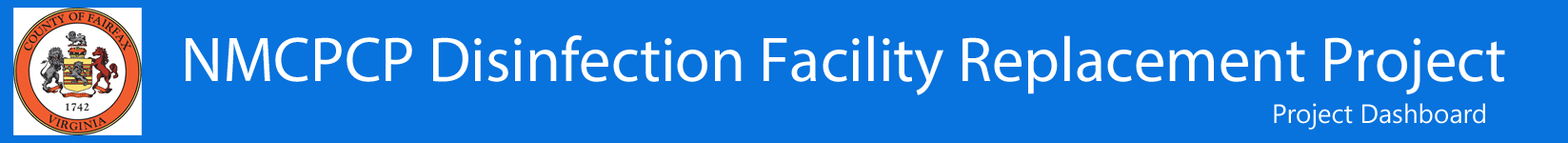
<style>
.page{position:relative;width:1568px;height:143px;background:#0872dd}
.page>*{position:absolute;margin:0}
.t1{font:63.5px "MyriadPro-Regular";color:#ffffff}
.t2{font:26.4px "Gadugi";color:#ffffff}
</style>
<div class="page">
<p class="t1" style="left:186px;top:35px;width:1319px;height:60px">NMCPCP Disinfection Facility Replacement Project</p>
<p class="t2" style="left:1274px;top:103px;width:211px;height:26px">Project Dashboard</p>
</div>
